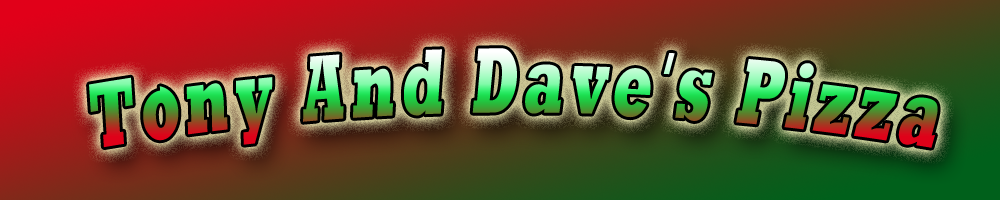
<style>
.page{position:relative;width:1000px;height:200px}
.page>*{position:absolute;margin:0}
.t1{font:92.6px "KILLIAN-Normal";letter-spacing:0.12em;font-style:italic;scale:0.57 1}
</style>
<div class="page">
<p class="t1" style="left:89px;top:48px;width:849px;height:100px">Tony And Dave's Pizza</p>
</div>
